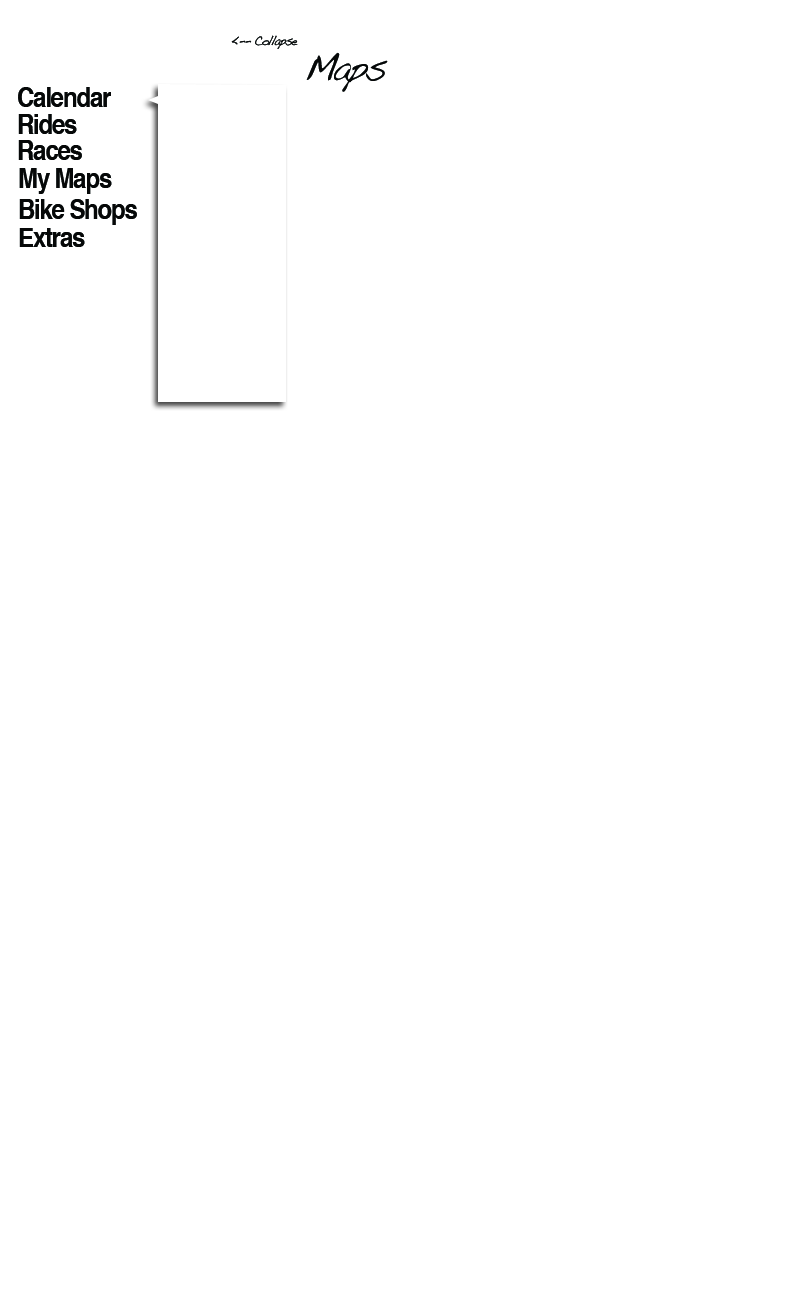
<style>
.page{position:relative;width:800px;height:1300px;background:#ffffff}
.page>*{position:absolute;margin:0}
.t1{font:13.2px "Handwriting-Dakota";letter-spacing:-0.075em;color:#060808;scale:0.91 1}
.t2{font:39.6px "Handwriting-Dakota";letter-spacing:-0.075em;color:#060808;scale:0.91 1}
.t3{font:26.4px "Helvetica-Bold";letter-spacing:-0.05em;color:#060808;scale:0.91 1}
</style>
<div class="page">
<p class="t1" style="left:231px;top:35px;width:67px;height:14px">&lt;-- Collapse</p>
<p class="t2" style="left:306px;top:52px;width:82px;height:40px">Maps</p>
<p class="t3" style="left:18px;top:87px;width:93px;height:20px">Calendar</p>
<p class="t3" style="left:18px;top:114px;width:59px;height:20px">Rides</p>
<p class="t3" style="left:18px;top:140px;width:64px;height:20px">Races</p>
<p class="t3" style="left:19px;top:168px;width:93px;height:26px">My Maps</p>
<p class="t3" style="left:19px;top:199px;width:118px;height:26px">Bike Shops</p>
<p class="t3" style="left:19px;top:228px;width:66px;height:19px">Extras</p>
</div>
